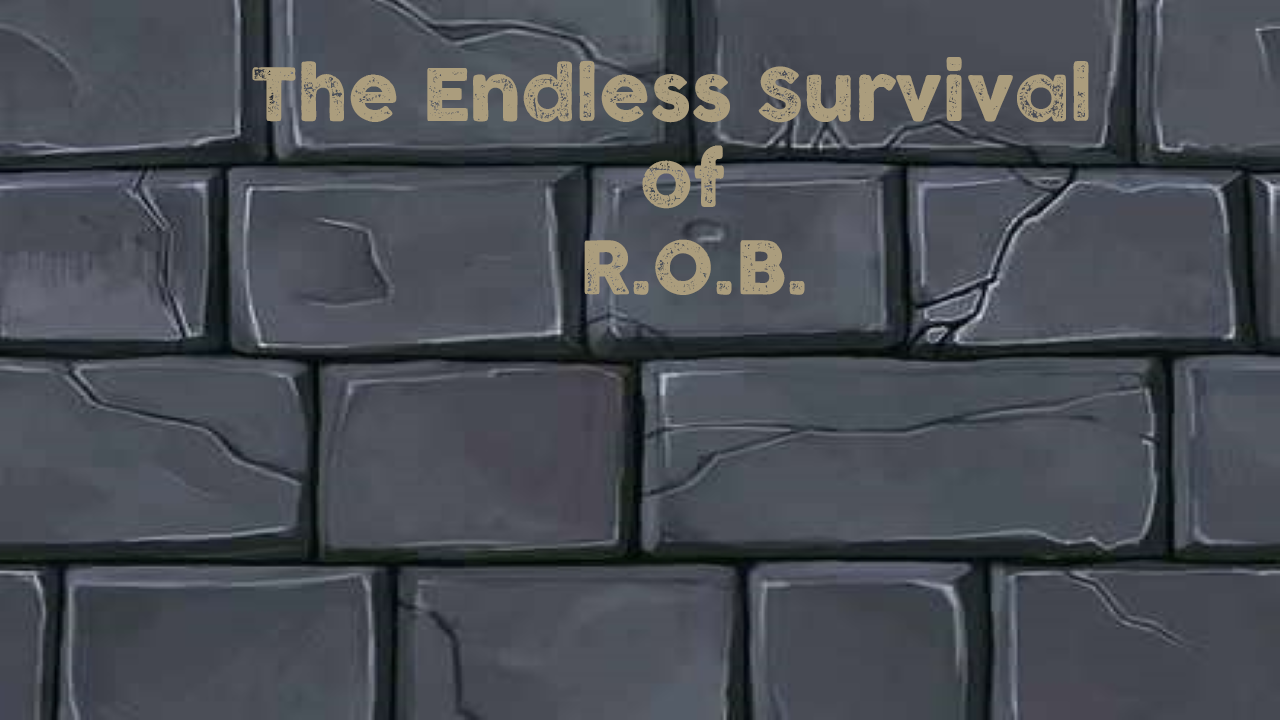
<style>
.page{position:relative;width:1280px;height:720px}
.page>*{position:absolute;margin:0}
.t1{font:72px "COCOGOOSELETTERPRESS";color:#ab9d7d}
</style>
<div class="page">
<p class="t1" style="left:252px;top:57px;width:837px;height:238px;text-align:center">The Endless Survival <br>of<br> R.O.B.</p>
</div>
